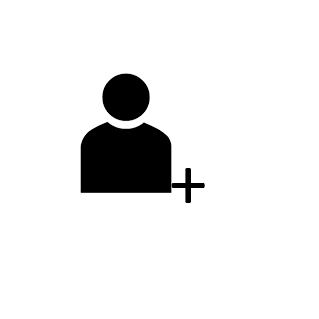
<style>
.page{position:relative;width:319px;height:319px;background:#ffffff}
.page>*{position:absolute;margin:0}
.t1{font:76.9px "Calibri";color:#000000}
</style>
<div class="page">
<p class="t1" style="left:171px;top:168px;width:34px;height:35px">+</p>
</div>
